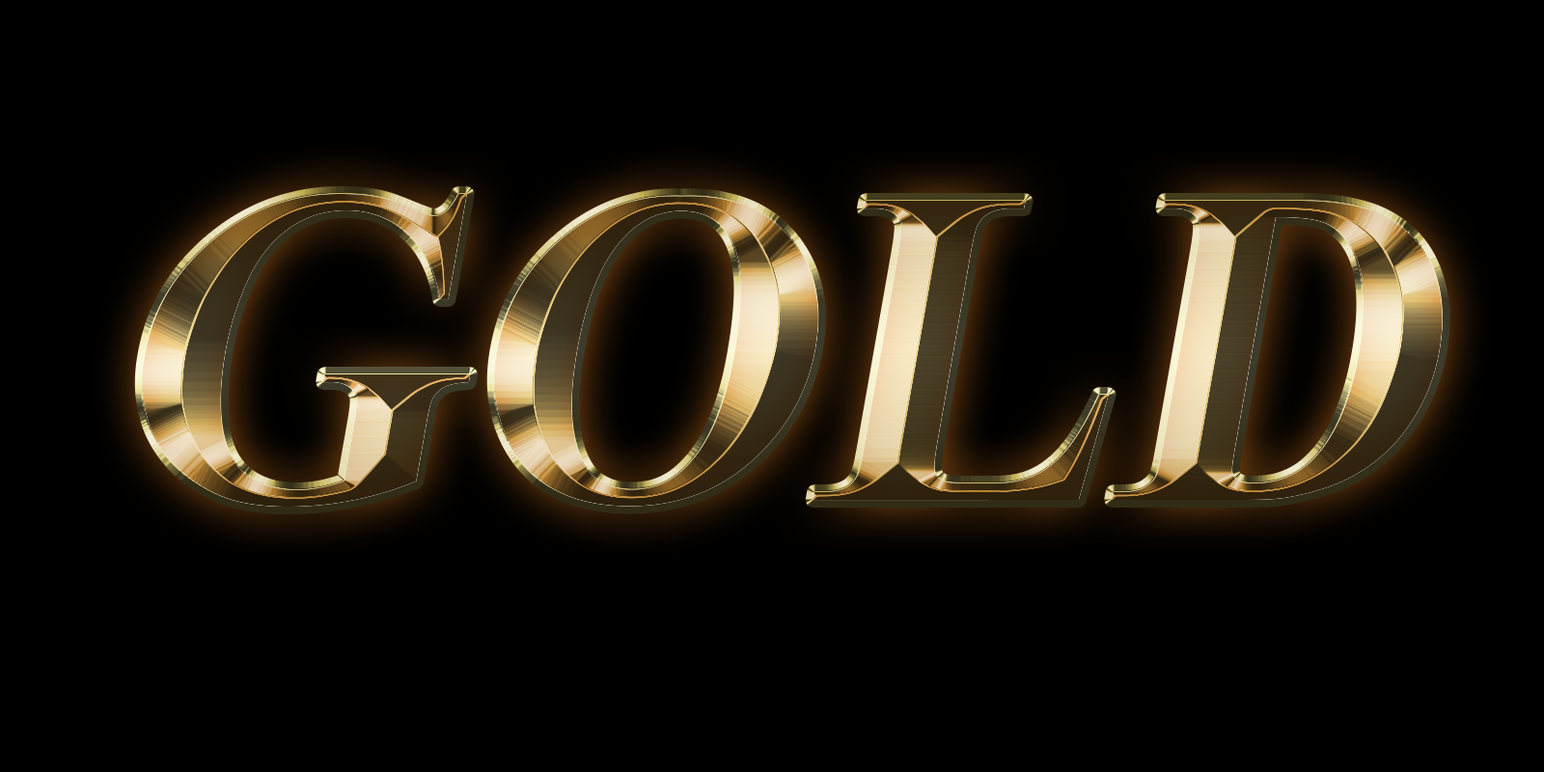
<style>
.page{position:relative;width:1544px;height:772px;background:#000000}
.page>*{position:absolute;margin:0}
.t1{font:451.9px "TimesNewRomanPS-BoldMT";font-style:italic}
</style>
<div class="page">
<p class="t1" style="left:142px;top:194px;width:1301px;height:313px">GOLD</p>
<p class="t1" style="left:142px;top:194px;width:1301px;height:313px">GOLD</p>
</div>
